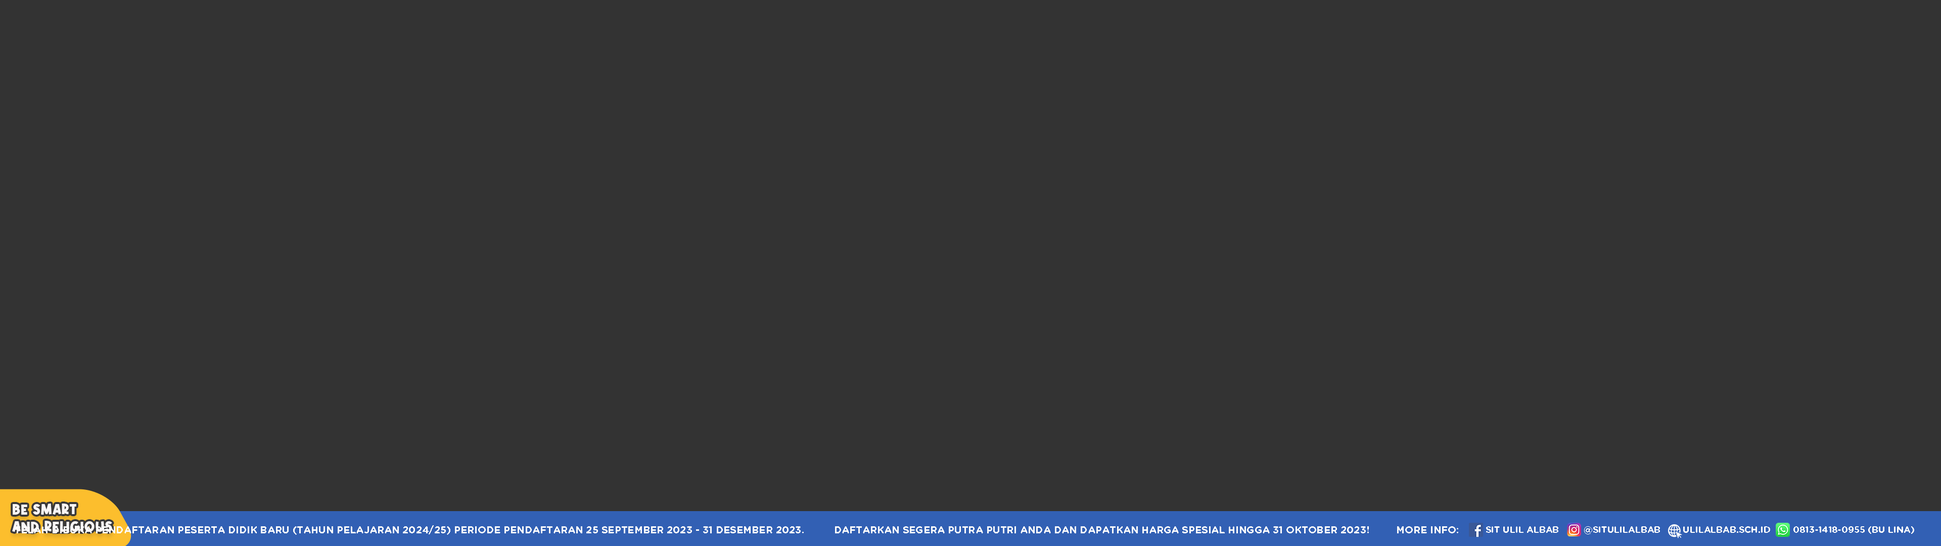
<style>
.page{position:relative;width:1941px;height:546px;background:#333333}
.page>*{position:absolute;margin:0}
.t1{font:14.2px "Alphakind";letter-spacing:0.025em;color:#faf6f6}
.t2{font:9.9px "GothamRounded-Bold";color:#fcfcfc}
.t3{font:9px "GothamRounded-Bold";color:#fcfcfc}
.t4{font:9px "GothamRounded-Bold";color:#fefefe}
</style>
<div class="page">
<p class="t1" style="left:12px;top:503px;width:100px;height:29px">BE SMART<br>AND RELIGIOUS</p>
<p class="t2" style="left:15px;top:525px;width:1443px;height:10px">TELAH DIBUKA PENDAFTARAN PESERTA DIDIK BARU (TAHUN PELAJARAN 2024/25) PERIODE PENDAFTARAN 25 SEPTEMBER 2023 - 31 DESEMBER 2023.          DAFTARKAN SEGERA PUTRA PUTRI ANDA DAN DAPATKAN HARGA SPESIAL HINGGA 31 OKTOBER 2023!         MORE INFO:</p>
<p class="t3" style="left:1486px;top:526px;width:72px;height:7px">SIT ULIL ALBAB</p>
<p class="t3" style="left:1584px;top:526px;width:76px;height:8px">@SITULILALBAB</p>
<p class="t3" style="left:1683px;top:526px;width:87px;height:7px">ULILALBAB.SCH.ID</p>
<p class="t4" style="left:1793px;top:526px;width:121px;height:8px">0813-1418-0955 (BU LINA)</p>
</div>
